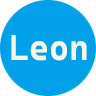
<style>
.page{position:relative;width:96px;height:96px;background:#00a1e9}
.page>*{position:absolute;margin:0}
.t1{font:36px "CascadiaCodeRoman-Bold";color:#f8f6e6;scale:0.95 1}
</style>
<div class="page">
<p class="t1" style="left:11px;top:35px;width:76px;height:26px">Leon</p>
</div>
